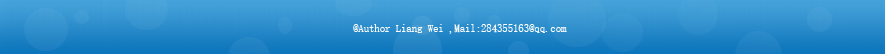
<style>
.page{position:relative;width:885px;height:54px}
.page>*{position:absolute;margin:0}
.t1{font:10.7px "SimSun";color:#fbfdfd}
</style>
<div class="page">
<p class="t1" style="left:353px;top:24px;width:214px;height:10px">@Author Liang Wei ,Mail:284355163@qq.com</p>
</div>
